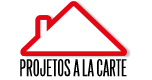
<style>
.page{position:relative;width:152px;height:80px;background:#ffffff}
.page>*{position:absolute;margin:0}
.t1{font:21.4px "Arizona";color:#000000}
</style>
<div class="page">
<p class="t1" style="left:20px;top:59px;width:107px;height:18px">PROJETOS A LA CARTE</p>
</div>
